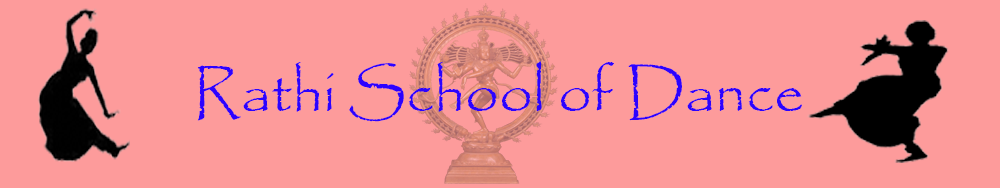
<style>
.page{position:relative;width:1000px;height:188px;background:#fd9b9b}
.page>*{position:absolute;margin:0}
.t1{font:60px "Papyrus-Regular";color:#2c02ff}
</style>
<div class="page">
<p class="t1" style="left:197px;top:61px;width:605px;height:61px">Rathi School of Dance</p>
</div>
